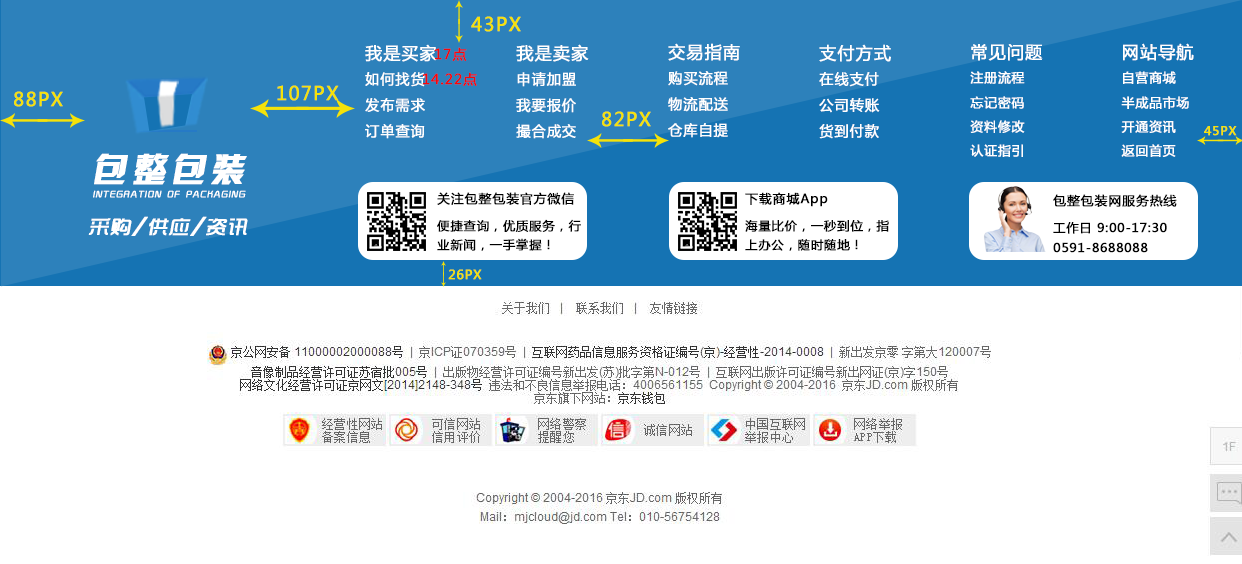
<style>
.page{position:relative;width:1242px;height:564px;background:#ffffff}
.page>*{position:absolute;margin:0}
.t1{font:18.9px "MicrosoftYaHei";letter-spacing:0.05em;color:#f6e209;font-weight:bold}
.t2{font:14.2px/25.9px "MicrosoftYaHei";letter-spacing:0.05em;color:#ffffff;font-weight:bold}
.t3{font:17px/25.9px "MicrosoftYaHei";letter-spacing:0.05em;color:#ffffff;font-weight:bold}
.t4{font:13.5px "MicrosoftYaHei";letter-spacing:0.05em;color:#f80707;font-weight:bold}
.t5{font:17.1px/25.9px "MicrosoftYaHei";letter-spacing:0.05em;color:#ffffff;font-weight:bold}
.t6{font:12.8px/24.4px "MicrosoftYaHei";letter-spacing:0.05em;color:#ffffff;font-weight:bold}
.t7{font:17.1px/24.4px "MicrosoftYaHei";letter-spacing:0.05em;color:#ffffff;font-weight:bold}
.t8{font:11.7px "MicrosoftYaHei";letter-spacing:0.05em;color:#f6e209;font-weight:bold;scale:1.03 1}
.t9{font:33.5px "JLinXin";letter-spacing:0.15em;color:#ffffff;font-weight:bold;font-style:italic}
.t10{font:8.8px "TRENDS";letter-spacing:0.11em;color:#ffffff;text-transform:uppercase;font-weight:bold;font-style:italic}
.t11{font:12.6px "MicrosoftYaHei";letter-spacing:0.05em;color:#000000;font-weight:bold}
.t12{font:20px "TRENDS";letter-spacing:0.05em;color:#ffffff;text-transform:uppercase;font-weight:bold;font-style:italic}
.t13{font:12px/19.2px "MicrosoftYaHei";letter-spacing:0.05em;color:#000000;font-weight:bold}
.t14{font:12px/19.8px "MicrosoftYaHei";letter-spacing:0.05em;color:#000000;font-weight:bold}
.t15{font:12.6px "MicrosoftYaHei";letter-spacing:0.05em;color:#f6e209;font-weight:bold}
</style>
<div class="page">
<p class="t1" style="left:471px;top:16px;width:50px;height:16px">43PX</p>
<p class="t2" style="left:365px;top:44px;width:72px;height:95px"><span class="t3">我是买家<br></span>如何找货<br>发布需求<br>订单查询</p>
<p class="t4" style="left:435px;top:47px;width:32px;height:14px">17点</p>
<p class="t2" style="left:516px;top:44px;width:73px;height:95px"><span class="t5">我是卖家<br></span>申请加盟<br>我要报价<br>撮合成交</p>
<p class="t2" style="left:668px;top:43px;width:72px;height:95px"><span class="t5">交易指南<br></span>购买流程<br>物流配送<br>仓库自提</p>
<p class="t2" style="left:819px;top:44px;width:72px;height:95px"><span class="t5">支付方式<br></span>在线支付<br>公司转账<br>货到付款</p>
<p class="t6" style="left:970px;top:44px;width:73px;height:113px"><span class="t7">常见问题<br></span>注册流程<br>忘记密码<br>资料修改<br>认证指引</p>
<p class="t6" style="left:1121px;top:43px;width:73px;height:114px"><span class="t7">网站导航<br></span>自营商城<br>半成品市场<br>开通资讯<br>返回首页</p>
<p class="t4" style="left:423px;top:72px;width:54px;height:14px">14.22点</p>
<p class="t1" style="left:277px;top:85px;width:62px;height:16px">107PX</p>
<p class="t1" style="left:14px;top:91px;width:49px;height:16px">88PX</p>
<p class="t1" style="left:602px;top:111px;width:49px;height:16px">82PX</p>
<p class="t8" style="left:1204px;top:126px;width:33px;height:10px">45PX</p>
<p class="t9" style="left:94px;top:153px;width:153px;height:32px">包整包装</p>
<p class="t10" style="left:93px;top:190px;width:153px;height:8px">integration of packaging</p>
<p class="t11" style="left:437px;top:192px;width:137px;height:13px">关注包整包装官方微信</p>
<p class="t11" style="left:745px;top:192px;width:83px;height:15px">下载商城App</p>
<p class="t11" style="left:1053px;top:194px;width:124px;height:13px">包整包装网服务热线</p>
<p class="t12" style="left:88px;top:216px;width:160px;height:20px">采购/供应/资讯</p>
<p class="t13" style="left:437px;top:219px;width:144px;height:32px">便捷查询，优质服务，行<br>业新闻，一手掌握！</p>
<p class="t13" style="left:745px;top:220px;width:144px;height:31px">海量比价，一秒到位，指<br>上办公，随时随地！</p>
<p class="t14" style="left:1053px;top:222px;width:114px;height:31px">工作日 9:00-17:30<br>0591-8688088</p>
<p class="t15" style="left:448px;top:269px;width:34px;height:11px">26PX</p>
</div>
